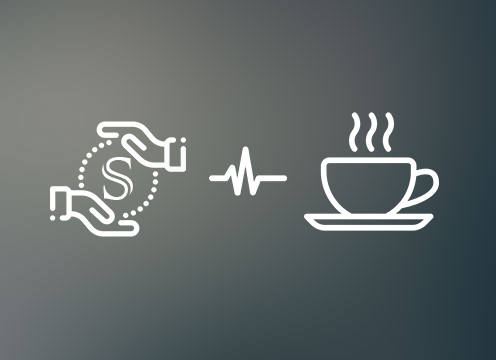
<style>
.page{position:relative;width:496px;height:360px}
.page>*{position:absolute;margin:0}
.t1{font:81.3px "ColonnaMT";color:#ffffff;scale:0.96 1}
</style>
<div class="page">
<p class="t1" style="left:102px;top:157px;width:31px;height:43px">S</p>
</div>
